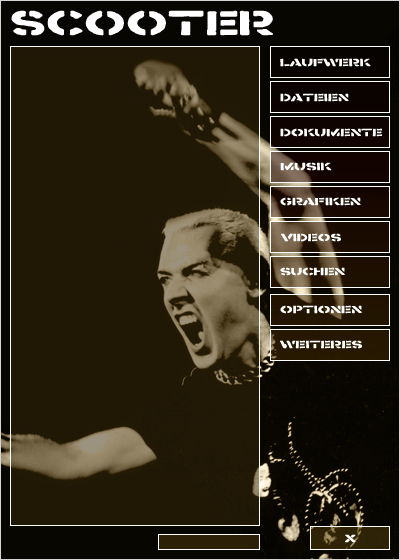
<style>
.page{position:relative;width:400px;height:560px;background:#201805}
.page>*{position:absolute;margin:0}
.t1{font:30px "Crass";letter-spacing:0.01em;color:#ffffff;font-weight:bold;scale:1.5 1}
.t2{font:9px "Crass";letter-spacing:0.01em;color:#ffffff;font-weight:bold;scale:1.5 1}
</style>
<div class="page">
<p class="t1" style="left:11px;top:10px;width:262px;height:26px">Scooter</p>
<p class="t2" style="left:280px;top:58px;width:91px;height:9px">Laufwerk</p>
<p class="t2" style="left:280px;top:93px;width:69px;height:9px">Dateien</p>
<p class="t2" style="left:280px;top:128px;width:102px;height:9px">Dokumente</p>
<p class="t2" style="left:280px;top:162px;width:52px;height:9px">Musik</p>
<p class="t2" style="left:280px;top:197px;width:81px;height:9px">Grafiken</p>
<p class="t2" style="left:281px;top:233px;width:60px;height:9px">Videos</p>
<p class="t2" style="left:280px;top:267px;width:65px;height:9px">Suchen</p>
<p class="t2" style="left:280px;top:305px;width:82px;height:9px">Optionen</p>
<p class="t2" style="left:280px;top:340px;width:82px;height:9px">Weiteres</p>
<p class="t2" style="left:345px;top:534px;width:11px;height:9px">X</p>
</div>
